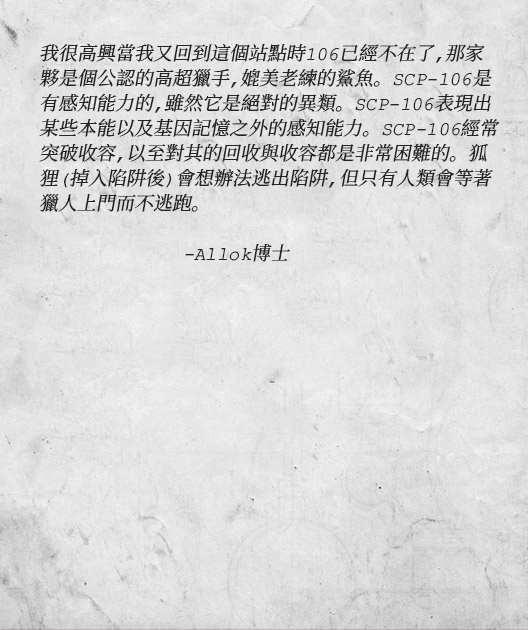
<style>
.page{position:relative;width:528px;height:630px}
.page>*{position:absolute;margin:0}
.t1{font:19px/25px "ContainmentBreach-Regular";color:#242424;font-style:italic}
</style>
<div class="page">
<p class="t1" style="left:39px;top:43px;width:461px;height:219px">我很高興當我又回到這個站點時106已經不在了，那家<br>夥是個公認的高超獵手，媲美老練的鯊魚。SCP-106是<br>有感知能力的，雖然它是絕對的異類。SCP-106表現出<br>某些本能以及基因記憶之外的感知能力。SCP-106經常<br>突破收容，以至對其的回收與收容都是非常困難的。狐<br>狸（掉入陷阱後）會想辦法逃出陷阱，但只有人類會等著<br>獵人上門而不逃跑。<br><br>    -Allok博士</p>
</div>
